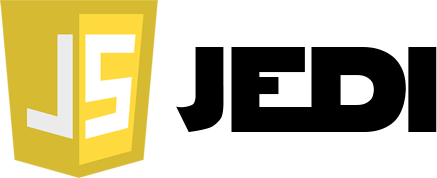
<style>
.page{position:relative;width:437px;height:178px;background:#ffffff}
.page>*{position:absolute;margin:0}
.t1{font:120.8px "StarJediSpecialEdition";color:#000000}
</style>
<div class="page">
<p class="t1" style="left:176px;top:47px;width:261px;height:85px">Jedi</p>
</div>
